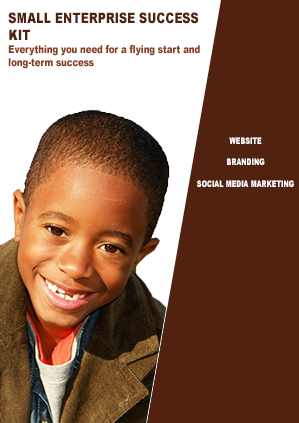
<style>
.page{position:relative;width:299px;height:423px;background:#51220f}
.page>*{position:absolute;margin:0}
.t1{font:10.7px "Arial-Black";color:#893d1e;scale:0.8 1}
.t2{font:14.2px "Arial-Black";color:#51220f;scale:0.8 1}
.t3{font:9px "Arial-Black";color:#ffffff;scale:0.71 1}
</style>
<div class="page">
<p class="t1" style="left:8px;top:12px;width:192px;height:57px"><span class="t2">SMALL ENTERPRISE SUCCESS<br>KIT<br></span>Everything you need for a flying start and <br>long-term success</p>
<p class="t3" style="left:197px;top:137px;width:97px;height:50px;text-align:center">WEBSITE<br><br>BRANDING<br><br>SOCIAL MEDIA MARKETING</p>
</div>
